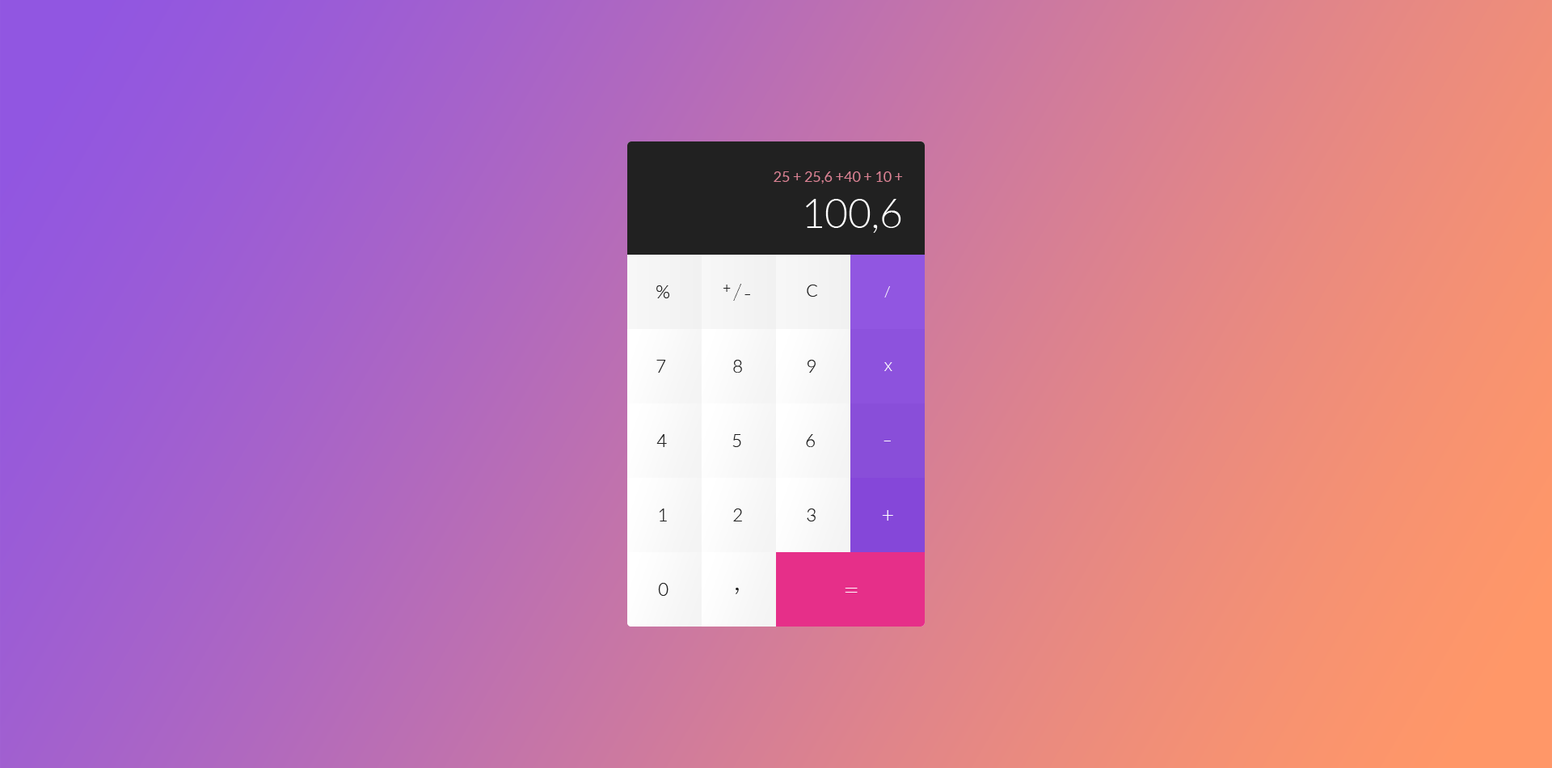
<style>
.page{position:relative;width:1552px;height:768px}
.page>*{position:absolute;margin:0}
.t1{font:14.6px "Lato-Regular";color:#d98192}
.t2{font:40.4px "Lato-Light";color:#ffffff}
.t3{font:18.6px "Lato-Light";color:#212121}
.t4{font:13.7px "Lato-Light";color:#212121}
.t5{font:22.6px "Lato-Hairline"}
.t6{font:17px "Lato-Light";color:#212121}
.t7{font:14.6px "Lato-Light";color:#ffffff}
.t8{font:21px "Lato-Light";color:#212121}
.t9{font:17.8px "Lato-Light";color:#212121}
.t10{font:17.8px "Lato-Light";color:#ffffff}
.t11{font:30.6px "Lato-Light";color:#ffffff;scale:0.93 1}
.t12{font:21.8px "Lato-Light";color:#ffffff}
.t13{font:32.3px "Lato-Light";color:#212121}
.t14{font:28.3px "Lato-Light";color:#ffffff}
</style>
<div class="page">
<p class="t1" style="left:774px;top:171px;width:129px;height:13px">25 + 25,6 +40 + 10 +</p>
<p class="t2" style="left:806px;top:199px;width:96px;height:34px">100,6</p>
<p class="t3" style="left:657px;top:285px;width:12px;height:13px">%</p>
<p class="t4" style="left:724px;top:285px;width:7px;height:7px">+</p>
<p class="t5" style="left:733px;top:284px;width:8px;height:17px">/</p>
<p class="t6" style="left:807px;top:285px;width:10px;height:12px">C</p>
<p class="t7" style="left:885px;top:286px;width:5px;height:12px">/</p>
<p class="t8" style="left:745px;top:294px;width:5px;height:1px">-</p>
<p class="t9" style="left:657px;top:360px;width:9px;height:13px">7</p>
<p class="t9" style="left:733px;top:360px;width:9px;height:13px">8</p>
<p class="t9" style="left:808px;top:360px;width:8px;height:13px">9</p>
<p class="t10" style="left:885px;top:362px;width:8px;height:9px">x</p>
<p class="t9" style="left:657px;top:434px;width:10px;height:13px">4</p>
<p class="t9" style="left:733px;top:434px;width:8px;height:13px">5</p>
<p class="t9" style="left:806px;top:434px;width:9px;height:13px">6</p>
<p class="t11" style="left:884px;top:441px;width:7px;height:0px">-</p>
<p class="t9" style="left:659px;top:509px;width:8px;height:13px">1</p>
<p class="t9" style="left:733px;top:509px;width:9px;height:13px">2</p>
<p class="t9" style="left:807px;top:509px;width:9px;height:13px">3</p>
<p class="t12" style="left:882px;top:510px;width:11px;height:11px">+</p>
<p class="t9" style="left:658px;top:583px;width:11px;height:13px">0</p>
<p class="t13" style="left:736px;top:588px;width:3px;height:6px">,</p>
<p class="t14" style="left:845px;top:588px;width:13px;height:5px">=</p>
</div>
